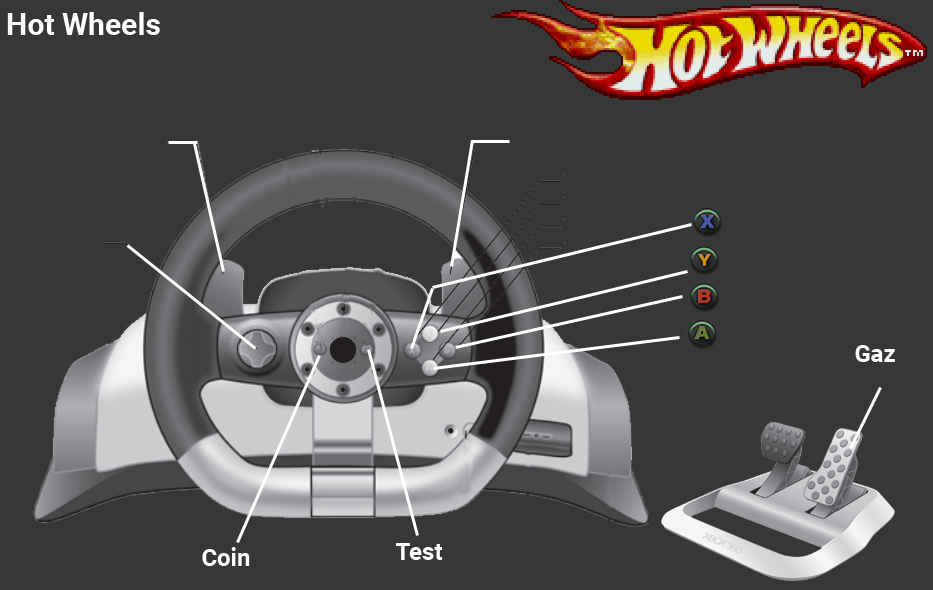
<style>
.page{position:relative;width:933px;height:590px;background:#363838}
.page>*{position:absolute;margin:0}
.t1{font:30px "Roboto-Bold";color:#ffffff}
.t2{font:24px "Roboto-Bold";color:#ffffff}
</style>
<div class="page">
<p class="t1" style="left:7px;top:12px;width:153px;height:23px">Hot Wheels</p>
<p class="t2" style="left:855px;top:345px;width:40px;height:17px">Gaz</p>
<p class="t2" style="left:396px;top:543px;width:47px;height:17px">Test</p>
<p class="t2" style="left:202px;top:547px;width:48px;height:19px">Coin</p>
</div>
